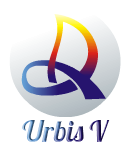
<style>
.page{position:relative;width:130px;height:150px;background:#ffffff}
.page>*{position:absolute;margin:0}
.t1{font:28.7px "Lobster-Regular"}
</style>
<div class="page">
<p class="t1" style="left:22px;top:120px;width:88px;height:22px">Urbis V</p>
</div>
